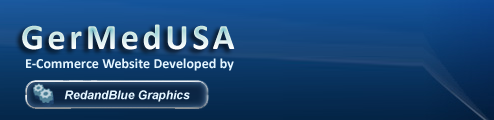
<style>
.page{position:relative;width:494px;height:120px}
.page>*{position:absolute;margin:0}
.t1{font:36px "Calibri-Bold";letter-spacing:0.1em}
.t2{font:14px "Calibri-Bold";letter-spacing:0.005em;color:#e3f5ff}
.t3{font:12px "Arial-BoldItalicMT";color:#e3f5ff}
</style>
<div class="page">
<p class="t1" style="left:22px;top:24px;width:213px;height:26px">GerMedUSA</p>
<p class="t2" style="left:26px;top:58px;width:208px;height:13px">E-Commerce Website Developed by</p>
<p class="t3" style="left:64px;top:90px;width:126px;height:12px">RedandBlue Graphics</p>
</div>
